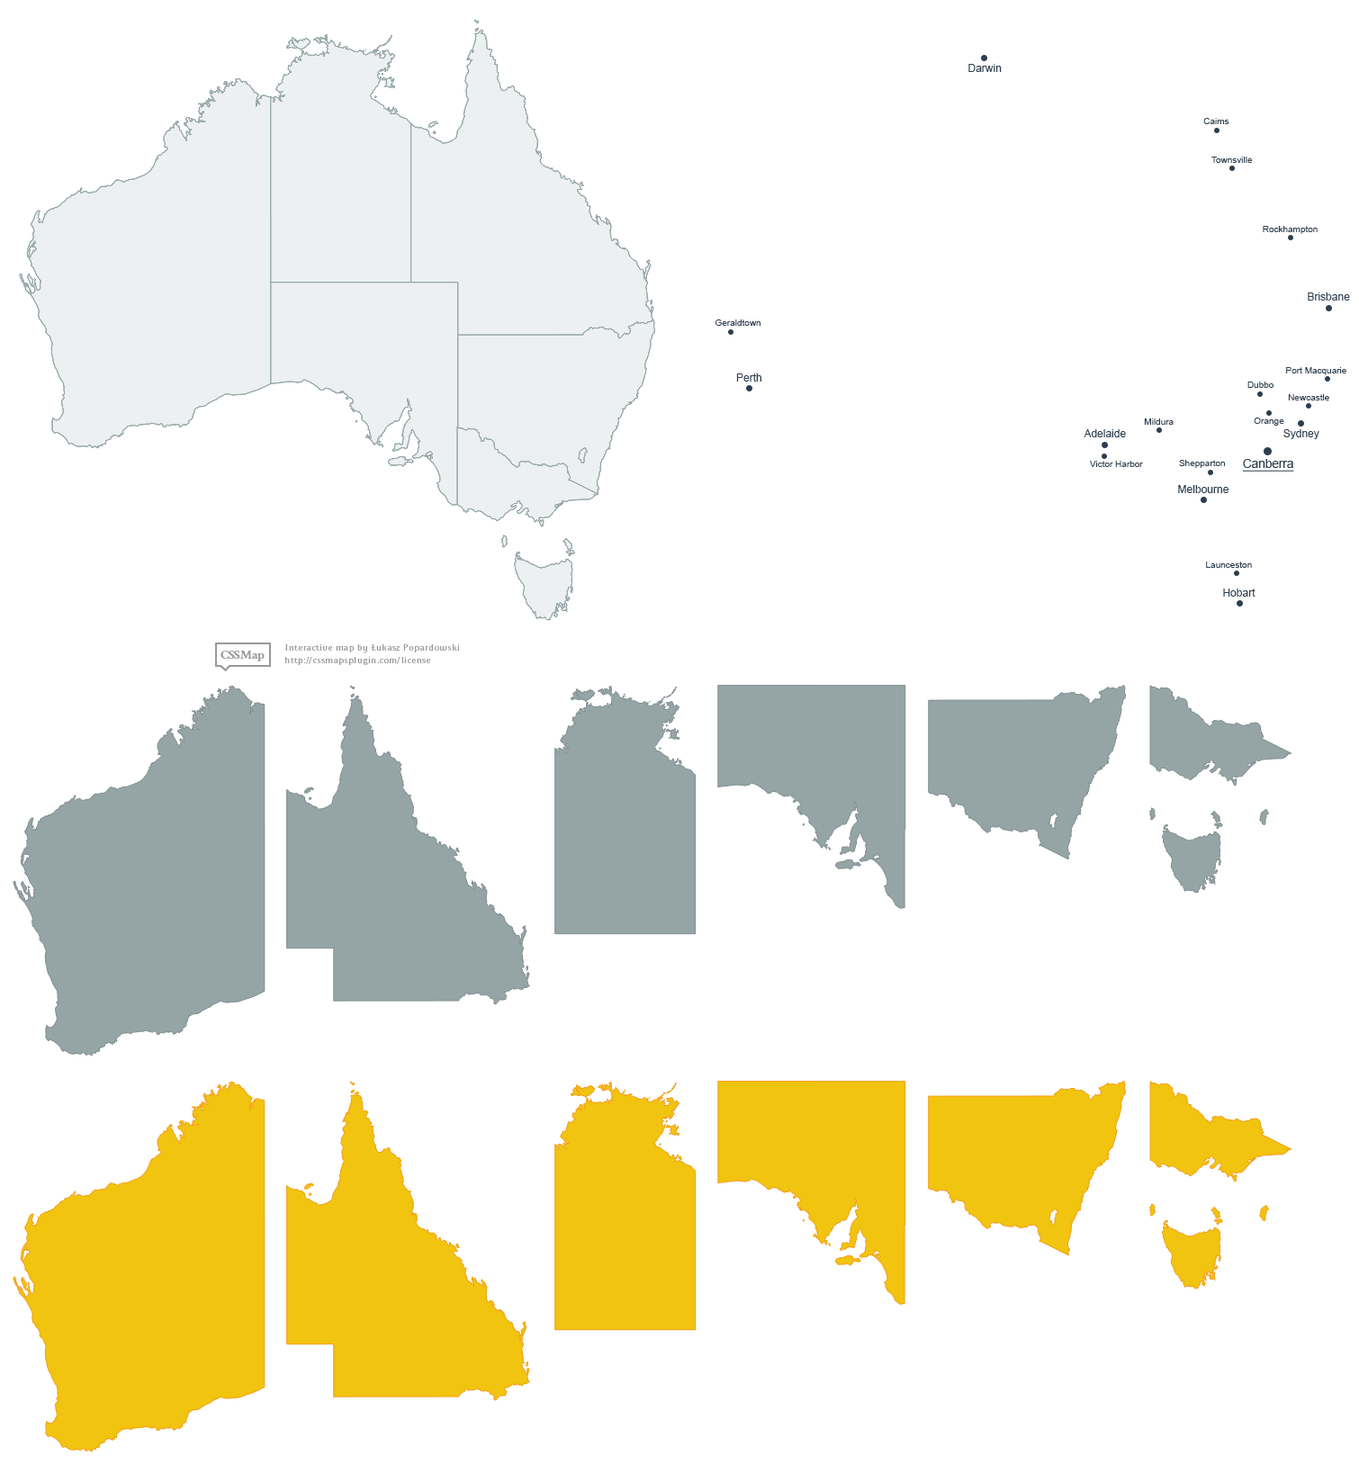
<style>
.page{position:relative;width:1359px;height:1465px;background:#ffffff}
.page>*{position:absolute;margin:0}
.t1{font:10.8px "ArialMT";color:#2c3e50}
.t2{font:9px "ArialMT";color:#2c3e50}
.t3{font:12.6px "ArialMT";color:#2c3e50;text-decoration:underline;scale:0.97 1}
</style>
<div class="page">
<p class="t1" style="left:968px;top:64px;width:34px;height:8px">Darwin</p>
<p class="t2" style="left:1203px;top:118px;width:26px;height:6px">Caims</p>
<p class="t2" style="left:1211px;top:157px;width:42px;height:6px">Townsville</p>
<p class="t2" style="left:1263px;top:226px;width:55px;height:8px">Rockhampton</p>
<p class="t1" style="left:1308px;top:292px;width:42px;height:9px">Brisbane</p>
<p class="t2" style="left:715px;top:319px;width:45px;height:7px">Geraldtown</p>
<p class="t1" style="left:736px;top:373px;width:25px;height:9px">Perth</p>
<p class="t2" style="left:1286px;top:367px;width:60px;height:8px">Port Macquarie</p>
<p class="t2" style="left:1247px;top:382px;width:26px;height:6px">Dubbo</p>
<p class="t2" style="left:1288px;top:394px;width:41px;height:6px">Newcastle</p>
<p class="t2" style="left:1144px;top:418px;width:30px;height:7px">Mildura</p>
<p class="t2" style="left:1254px;top:418px;width:30px;height:8px">Orange</p>
<p class="t1" style="left:1084px;top:429px;width:42px;height:8px">Adelaide</p>
<p class="t1" style="left:1283px;top:429px;width:36px;height:10px">Sydney</p>
<p class="t2" style="left:1090px;top:461px;width:53px;height:6px">Victor Harbor</p>
<p class="t2" style="left:1179px;top:460px;width:46px;height:8px">Shepparton</p>
<p class="t3" style="left:1242px;top:459px;width:52px;height:13px">Canberra</p>
<p class="t1" style="left:1178px;top:485px;width:50px;height:8px">Melbourne</p>
<p class="t2" style="left:1206px;top:562px;width:46px;height:6px">Launceston</p>
<p class="t1" style="left:1223px;top:589px;width:32px;height:8px">Hobart</p>
</div>
